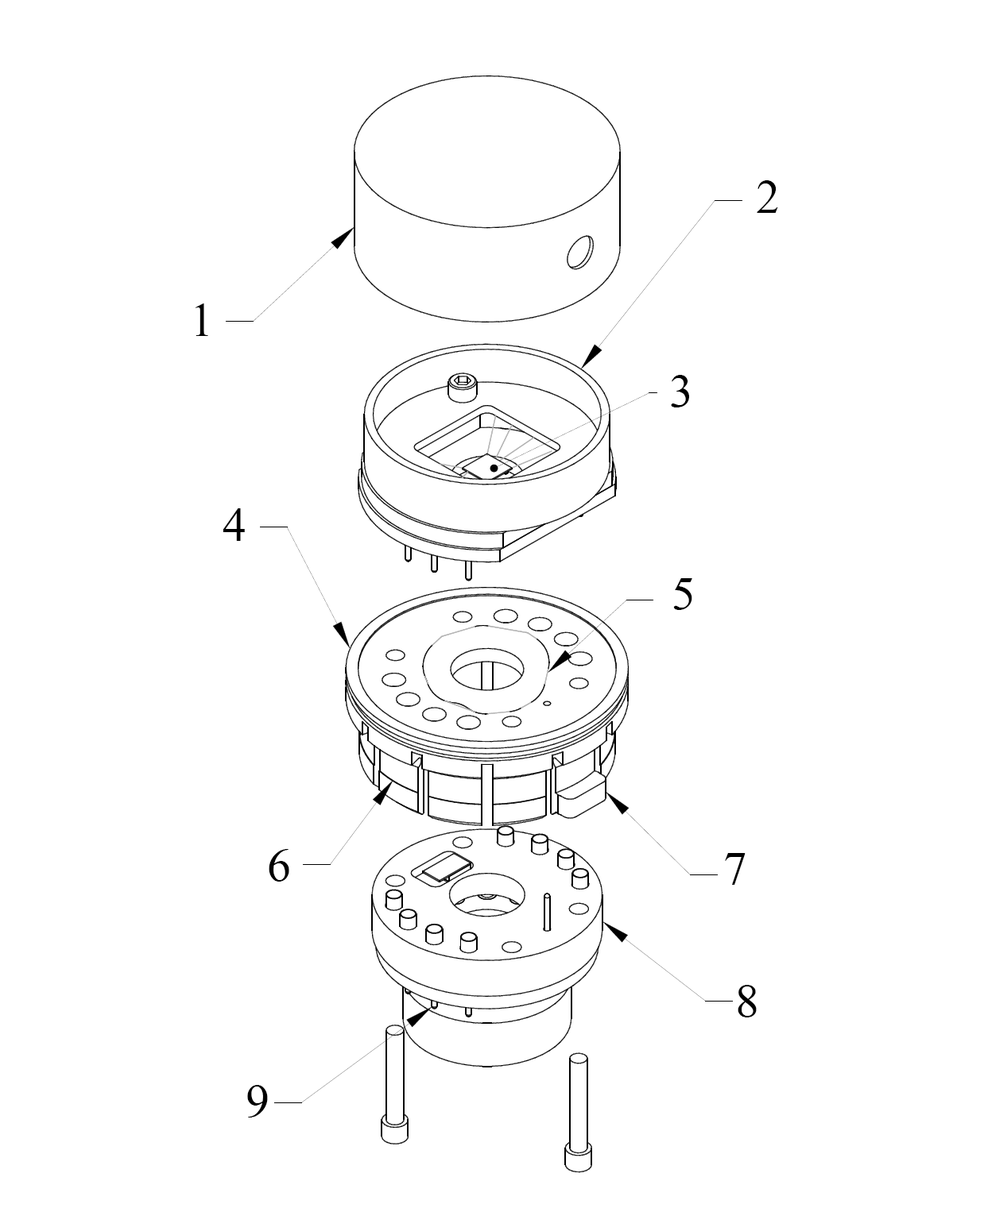
<style>
.page{position:relative;width:984px;height:1212px;background:#ffffff}
.page>*{position:absolute;margin:0}
.t1{font:47.7px "TimesNewRomanPSMT";color:#000000}
</style>
<div class="page">
<p class="t1" style="left:756px;top:180px;width:22px;height:33px">2</p>
<p class="t1" style="left:195px;top:303px;width:13px;height:33px">1</p>
<p class="t1" style="left:671px;top:375px;width:18px;height:33px">3</p>
<p class="t1" style="left:222px;top:508px;width:23px;height:33px">4</p>
<p class="t1" style="left:673px;top:578px;width:19px;height:32px">5</p>
<p class="t1" style="left:269px;top:849px;width:20px;height:33px">6</p>
<p class="t1" style="left:725px;top:853px;width:20px;height:32px">7</p>
<p class="t1" style="left:737px;top:985px;width:19px;height:33px">8</p>
<p class="t1" style="left:247px;top:1085px;width:21px;height:33px">9</p>
</div>
